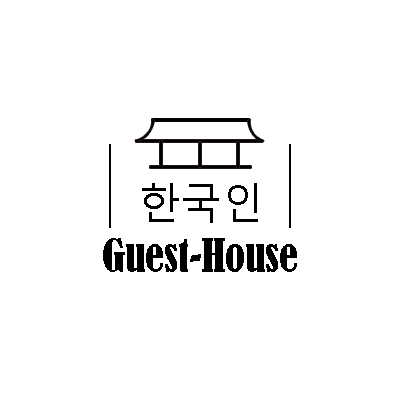
<style>
.page{position:relative;width:400px;height:400px;background:#ffffff}
.page>*{position:absolute;margin:0}
.t1{font:41.7px "MalgunGothic";color:#000000}
.t2{font:41.7px "BernardMT-Condensed";color:#000000}
</style>
<div class="page">
<p class="t1" style="left:142px;top:183px;width:116px;height:40px">한국인</p>
<p class="t2" style="left:103px;top:238px;width:194px;height:34px">Guest-House</p>
</div>
